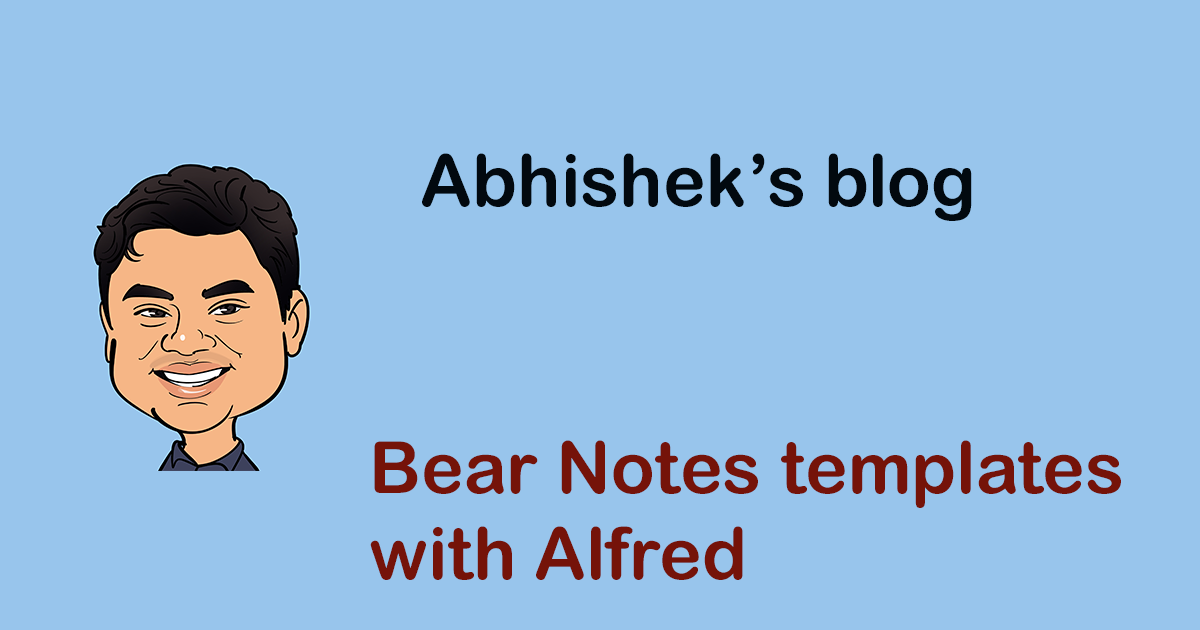
<style>
.page{position:relative;width:1200px;height:630px;background:#98c5ec}
.page>*{position:absolute;margin:0}
.t1{font:72px "ArialRoundedMTBold";color:#02090f}
.t2{font:72px "ArialRoundedMTBold";color:#751309}
</style>
<div class="page">
<p class="t1" style="left:422px;top:153px;width:550px;height:68px">Abhishek’s blog</p>
<p class="t2" style="left:370px;top:440px;width:751px;height:140px">Bear Notes templates <br>with Alfred</p>
</div>
